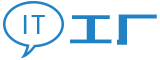
<style>
.page{position:relative;width:160px;height:60px;background:#ffffff}
.page>*{position:absolute;margin:0}
.t1{font:25px "MicrosoftYaHeiUI";letter-spacing:0.1em;color:#2182c6}
.t2{font:41.7px "MFBanHei_Noncommercial-Regular";letter-spacing:0.1em;color:#2182c6}
</style>
<div class="page">
<p class="t1" style="left:23px;top:15px;width:22px;height:19px">IT</p>
<p class="t2" style="left:70px;top:14px;width:87px;height:31px">工厂</p>
</div>
